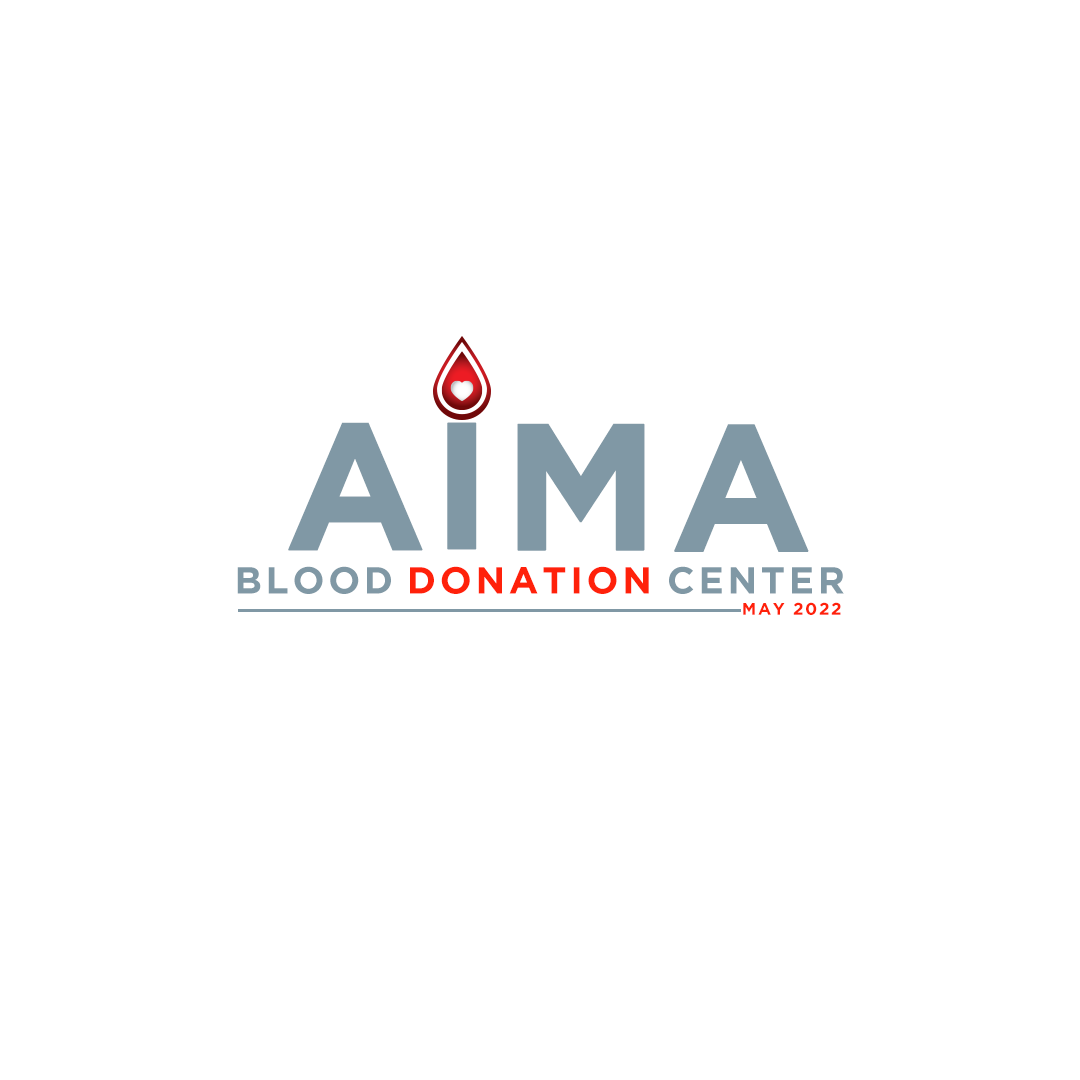
<style>
.page{position:relative;width:1080px;height:1080px;background:#ffffff}
.page>*{position:absolute;margin:0}
.t1{font:179.2px "Gotham-Bold";letter-spacing:0.1em;color:#8098a5;text-transform:uppercase;font-weight:bold}
.t2{font:37.5px "Gotham-Bold";letter-spacing:0.1em;color:#8098a5;text-transform:uppercase}
.t3{font:37.5px "Gotham-Bold";letter-spacing:0.1em;color:#ff210a;text-transform:uppercase}
.t4{font:16.7px "Gotham-Bold";letter-spacing:0.1em;color:#ff210a;text-transform:uppercase}
</style>
<div class="page">
<p class="t1" style="left:288px;top:422px;width:135px;height:129px">a</p>
<p class="t1" style="left:447px;top:422px;width:30px;height:128px">i</p>
<p class="t1" style="left:517px;top:423px;width:128px;height:128px">m</p>
<p class="t1" style="left:674px;top:424px;width:135px;height:128px">a</p>
<p class="t2" style="left:237px;top:566px;width:154px;height:28px">blood</p>
<p class="t3" style="left:410px;top:566px;width:239px;height:28px">donation</p>
<p class="t2" style="left:669px;top:566px;width:175px;height:28px">center</p>
<p class="t4" style="left:743px;top:602px;width:98px;height:13px">may 2022</p>
</div>
